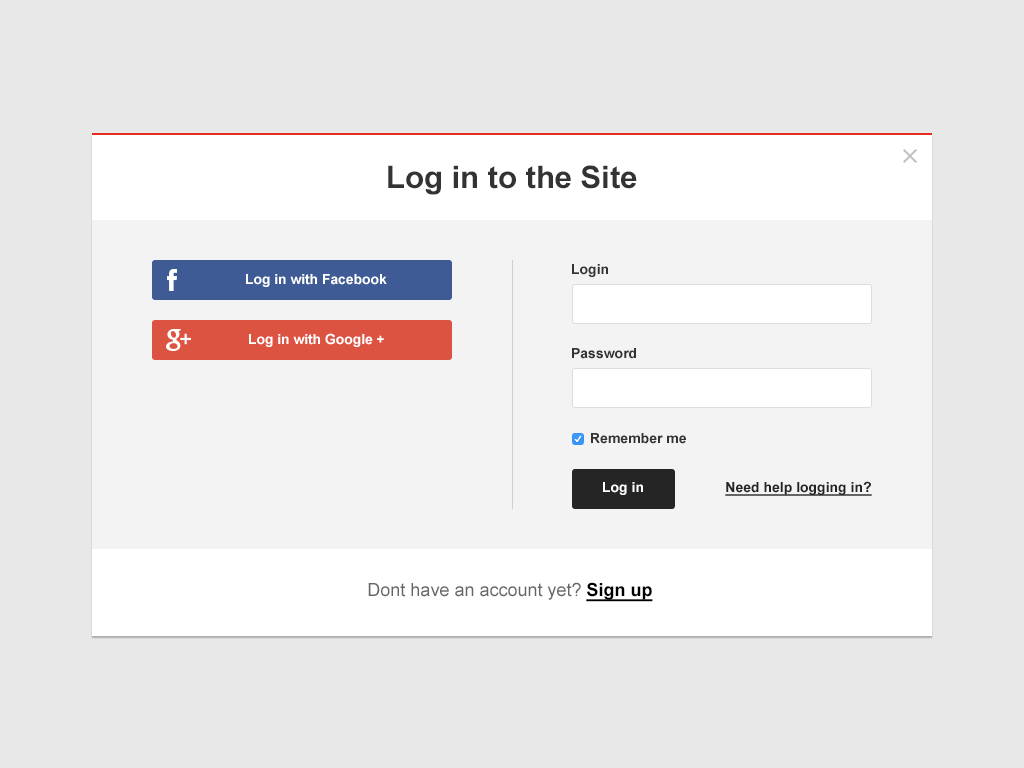
<style>
.page{position:relative;width:1024px;height:768px;background:#e8e8e8}
.page>*{position:absolute;margin:0}
.t1{font:31px "Arial-BoldMT";color:#333333}
.t2{font:14px "Arial-BoldMT";color:#333333}
.t3{font:14px "Arial-BoldMT";letter-spacing:-0.005em;color:#ffffff}
.t4{font:14px "Arial-BoldMT";color:#ffffff}
.t5{font:14px "Arial-BoldMT";color:#252525;text-decoration:underline}
.t6{font:18px "ArialMT";color:#666666}
.t7{font:18px "Arial-BoldMT";color:#000000;text-decoration:underline}
</style>
<div class="page">
<p class="t1" style="left:388px;top:165px;width:249px;height:30px">Log in to the Site</p>
<p class="t2" style="left:572px;top:264px;width:36px;height:13px">Login</p>
<p class="t3" style="left:246px;top:274px;width:141px;height:13px">Log in with Facebook</p>
<p class="t3" style="left:249px;top:333px;width:135px;height:14px">Log in with Google +</p>
<p class="t2" style="left:572px;top:348px;width:64px;height:11px">Password</p>
<p class="t2" style="left:591px;top:433px;width:95px;height:11px">Remember me</p>
<p class="t4" style="left:603px;top:482px;width:40px;height:13px">Log in</p>
<p class="t5" style="left:725px;top:481px;width:147px;height:15px">Need help logging in?</p>
<p class="t6" style="left:368px;top:582px;width:285px;height:20px">Dont have an account yet? <span class="t7">Sign up</span></p>
</div>
